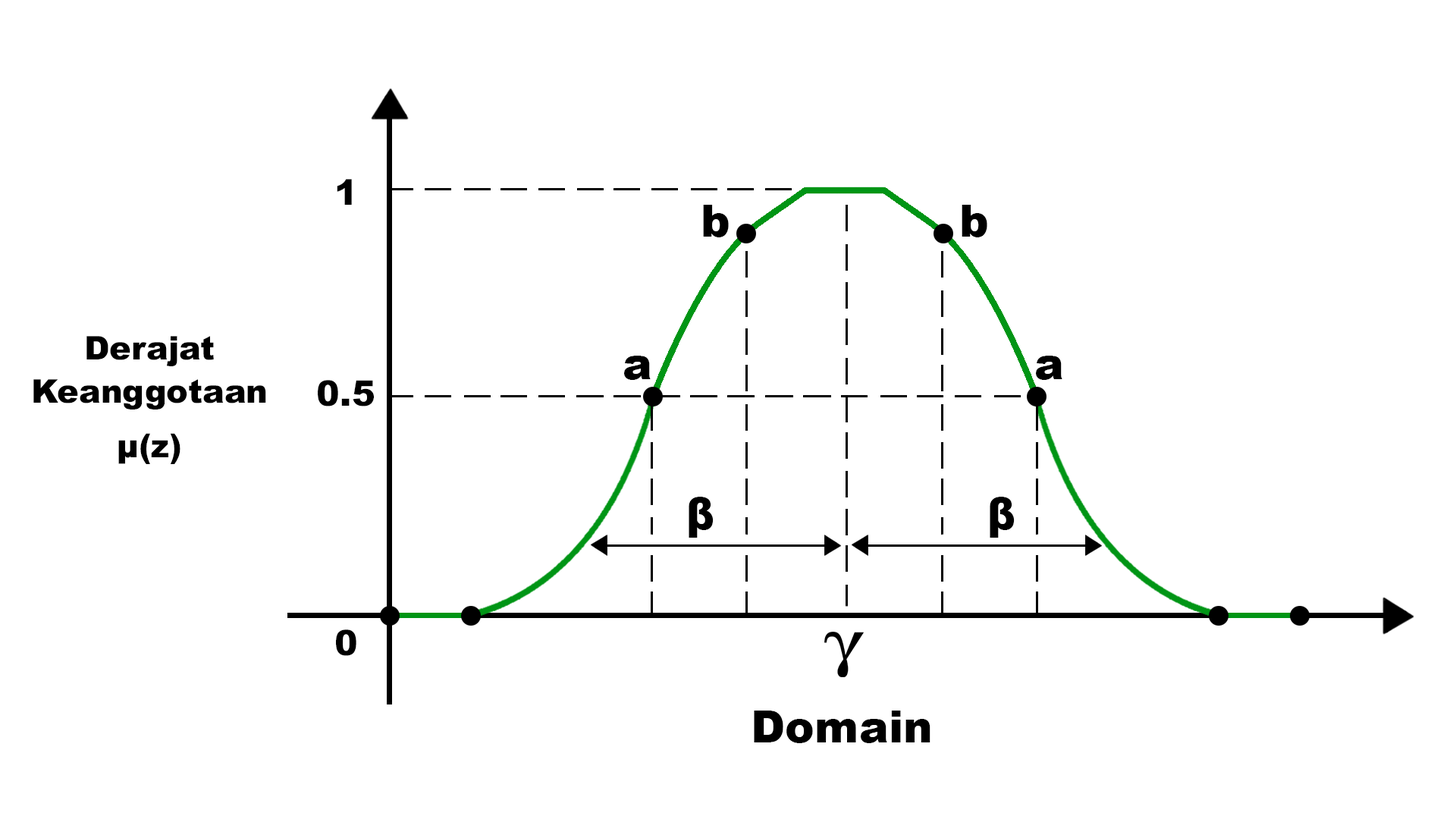
<style>
.page{position:relative;width:1456px;height:819px;background:#ffffff}
.page>*{position:absolute;margin:0}
.t1{font:35.2px "Arial-Black";color:#000000}
.t2{font:44.2px "Arial-Black";color:#000000}
.t3{font:32.6px/43.5px "Arial-Black";color:#000000}
.t4{font:32.6px/54.3px "Arial-Black";color:#000000}
</style>
<div class="page">
<p class="t1" style="left:337px;top:179px;width:15px;height:26px">1</p>
<p class="t2" style="left:703px;top:205px;width:26px;height:32px">b</p>
<p class="t2" style="left:962px;top:205px;width:25px;height:32px">b</p>
<p class="t3" style="left:33px;top:336px;width:233px;height:128px;text-align:center">Derajat<br>Keanggotaan<span class="t4"><br>μ(z)</span></p>
<p class="t2" style="left:624px;top:356px;width:27px;height:24px">a</p>
<p class="t2" style="left:1036px;top:356px;width:26px;height:24px">a</p>
<p class="t1" style="left:318px;top:380px;width:56px;height:26px">0.5</p>
<p class="t2" style="left:689px;top:497px;width:25px;height:41px">β</p>
<p class="t2" style="left:990px;top:497px;width:25px;height:41px">β</p>
<p class="t1" style="left:336px;top:629px;width:20px;height:27px">0</p>
<p class="t2" style="left:754px;top:711px;width:176px;height:32px">Domain</p>
</div>
